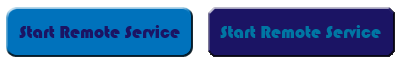
<style>
.page{position:relative;width:400px;height:64px;background:#1b1464}
.page>*{position:absolute;margin:0}
.t1{font:18px "Bauhaus93";color:#1b1464}
.t2{font:18px "Bauhaus93";color:#0076a3}
</style>
<div class="page">
<p class="t1" style="left:19px;top:25px;width:161px;height:14px">Start Remote Service</p>
<p class="t2" style="left:220px;top:25px;width:161px;height:14px">Start Remote Service</p>
</div>
